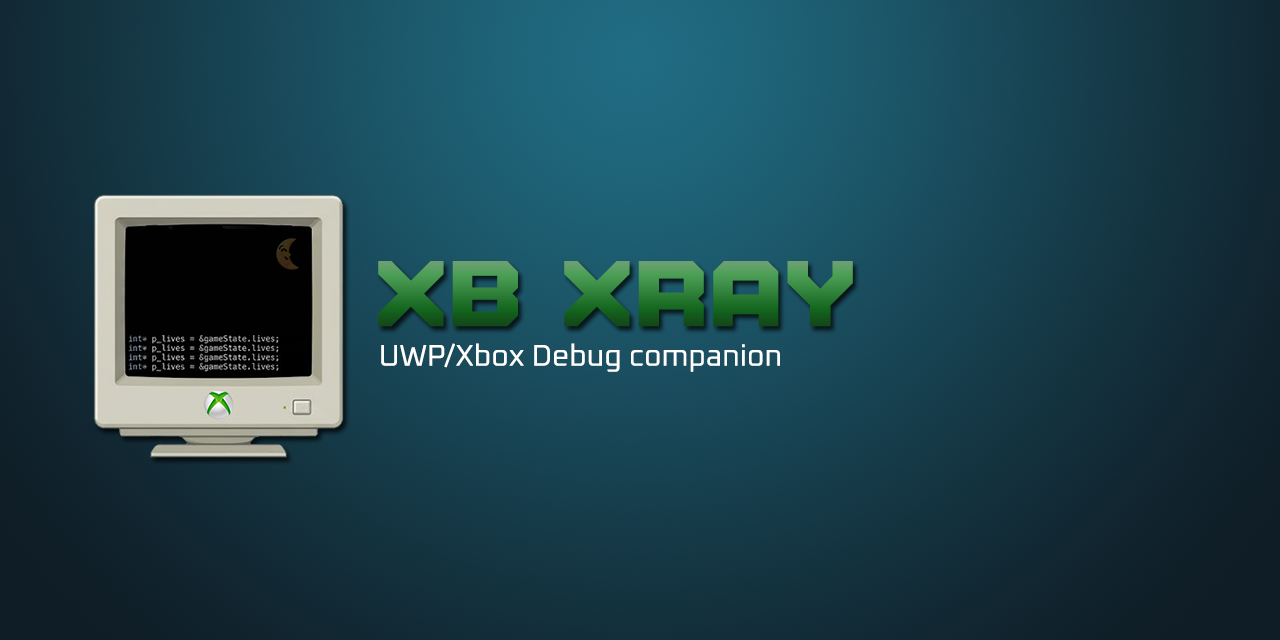
<style>
.page{position:relative;width:1280px;height:640px}
.page>*{position:absolute;margin:0}
.t1{font:100px "NintendoLabo"}
.t2{font:30px "Oxanium-Regular";color:#ffffff}
</style>
<div class="page">
<p class="t1" style="left:378px;top:261px;width:475px;height:66px">XB Xray</p>
<p class="t2" style="left:381px;top:343px;width:399px;height:29px">UWP/Xbox Debug companion</p>
</div>
